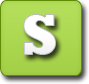
<style>
.page{position:relative;width:89px;height:84px}
.page>*{position:absolute;margin:0}
.t1{font:60px "Rockwell-ExtraBold";color:#fcfcfc}
</style>
<div class="page">
<p class="t1" style="left:23px;top:14px;width:34px;height:41px">S</p>
</div>
